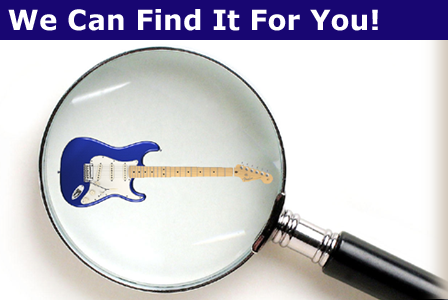
<style>
.page{position:relative;width:448px;height:300px;background:#ffffff}
.page>*{position:absolute;margin:0}
.t1{font:27.9px "Verdana-Bold";color:#ffffff}
</style>
<div class="page">
<p class="t1" style="left:8px;top:9px;width:370px;height:22px">We Can Find It For You!</p>
</div>
